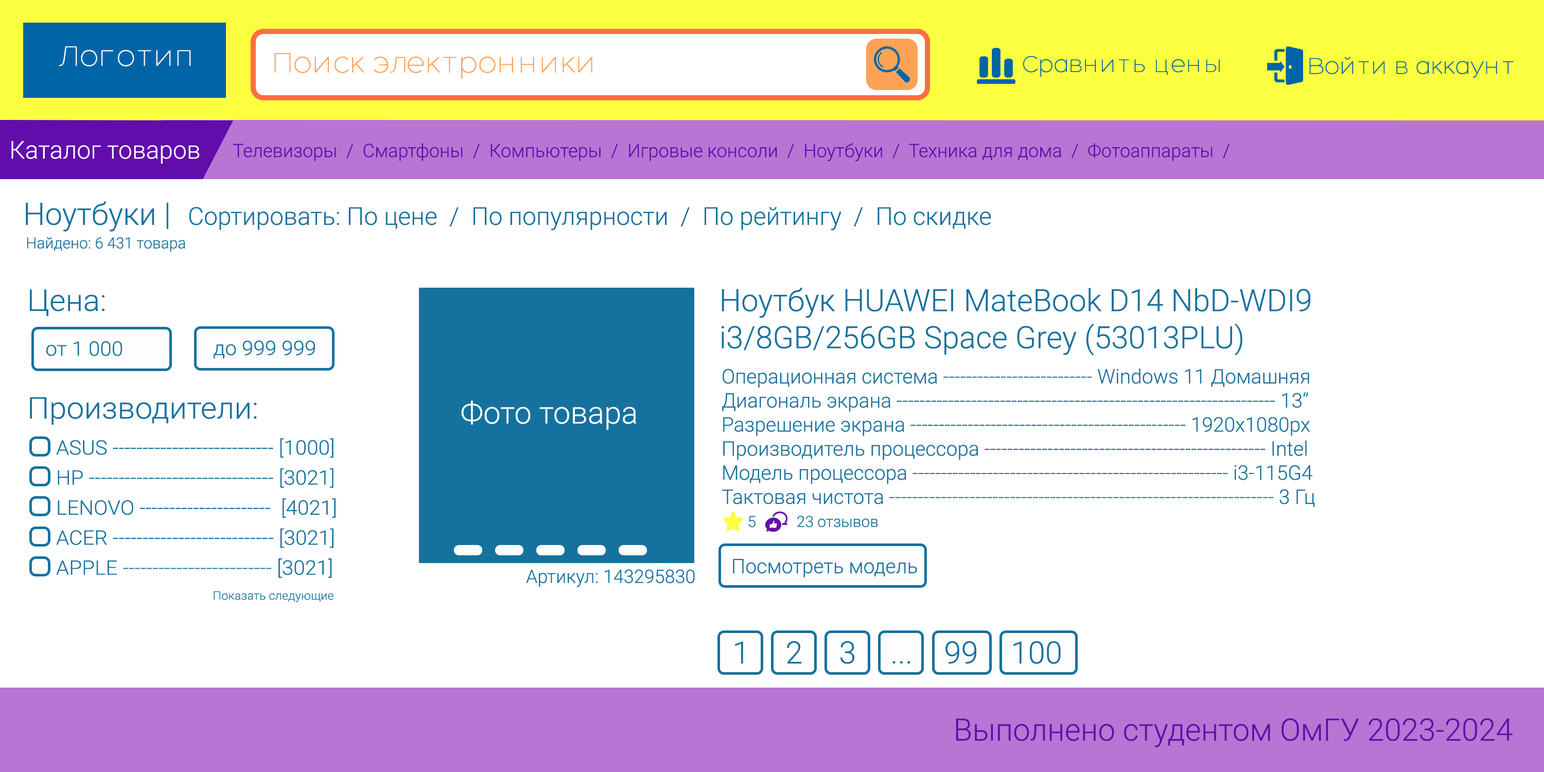
<style>
.page{position:relative;width:1544px;height:772px;background:#ffffff}
.page>*{position:absolute;margin:0}
.t1{font:30.9px "Hero-Light";color:#ffffff}
.t2{font:30.9px "Hero-Light";color:#fea356}
.t3{font:24.7px "Hero-Light";color:#0065a6}
.t4{font:24.7px "Roboto-Light";color:#ffffff}
.t5{font:18.5px "Roboto-Light";color:#620cac}
.t6{font:30.9px "Roboto-Light";color:#15729e}
.t7{font:24.7px "Roboto-Light";color:#15729e}
.t8{font:15.4px "Roboto-Light";color:#15729e}
.t9{font:30px "Roboto-Light";color:#15729e;scale:1.04 1}
.t10{font:20px "Roboto-Light";color:#15729e;scale:1.04 1}
.t11{font:20.1px "Roboto-Light";color:#15729e}
.t12{font:30.9px "Roboto-Light";color:#ffffff}
.t13{font:18.5px "Roboto-Light";color:#15729e}
.t14{font:11.7px "Roboto-Light";color:#15729e;scale:1.04 1}
.t15{font:30.9px "Roboto-Light";color:#620cac}
</style>
<div class="page">
<p class="t1" style="left:59px;top:46px;width:132px;height:20px">Логотип</p>
<p class="t2" style="left:274px;top:53px;width:318px;height:26px">Поиск электронники</p>
<p class="t3" style="left:1023px;top:56px;width:197px;height:21px">Сравнить цены</p>
<p class="t3" style="left:1310px;top:57px;width:204px;height:21px">Войти в аккаунт</p>
<p class="t4" style="left:11px;top:141px;width:189px;height:23px">Каталог товаров</p>
<p class="t5" style="left:233px;top:143px;width:997px;height:18px">Телевизоры  /  Смартфоны  /  Компьютеры  /  Игровые консоли  /  Ноутбуки  /  Техника для дома  /  Фотоаппараты  /</p>
<p class="t6" style="left:26px;top:201px;width:142px;height:31px">Ноутбуки |</p>
<p class="t7" style="left:189px;top:207px;width:802px;height:24px">Сортировать: По цене  /  По популярности  /  По рейтингу  /  По скидке</p>
<p class="t8" style="left:27px;top:237px;width:158px;height:15px">Найдено: 6 431 товара</p>
<p class="t9" style="left:30px;top:289px;width:75px;height:28px">Цена:</p>
<p class="t6" style="left:721px;top:288px;width:590px;height:68px">Ноутбук HUAWEI MateBook D14 NbD-WDI9 <br>i3/8GB/256GB Space Grey (53013PLU)</p>
<p class="t10" style="left:46px;top:341px;width:76px;height:15px">от 1 000</p>
<p class="t10" style="left:214px;top:340px;width:101px;height:19px">до 999 999</p>
<p class="t11" style="left:722px;top:368px;width:593px;height:140px">Операционная система -------------------------- Windows 11 Домашняя<br>Диагональ экрана ------------------------------------------------------------------ 13‘’<br>Разрешение экрана ------------------------------------------------ 1920x1080px<br>Производитель процессора ------------------------------------------------- Intel<br>Модель процессора ------------------------------------------------------- i3-115G4<br>Тактовая чистота ------------------------------------------------------------------- 3 Гц</p>
<p class="t9" style="left:30px;top:397px;width:227px;height:28px">Производители:</p>
<p class="t12" style="left:461px;top:400px;width:175px;height:30px">Фото товара</p>
<p class="t10" style="left:56px;top:438px;width:278px;height:20px">ASUS --------------------------- [1000]</p>
<p class="t10" style="left:58px;top:468px;width:276px;height:20px">HP ------------------------------- [3021]</p>
<p class="t10" style="left:58px;top:498px;width:278px;height:20px">LENOVO ----------------------  [4021]</p>
<p class="t8" style="left:748px;top:516px;width:8px;height:12px">5</p>
<p class="t8" style="left:797px;top:516px;width:81px;height:12px">23 отзывов</p>
<p class="t10" style="left:56px;top:528px;width:278px;height:20px">ACER --------------------------- [3021]</p>
<p class="t10" style="left:56px;top:559px;width:276px;height:19px">APPLE ------------------------- [3021]</p>
<p class="t13" style="left:526px;top:569px;width:169px;height:18px">Артикул: 143295830</p>
<p class="t11" style="left:733px;top:559px;width:184px;height:19px">Посмотреть модель</p>
<p class="t14" style="left:214px;top:591px;width:120px;height:11px">Показать следующие</p>
<p class="t6" style="left:735px;top:641px;width:8px;height:23px">1</p>
<p class="t6" style="left:787px;top:641px;width:15px;height:23px">2</p>
<p class="t6" style="left:841px;top:641px;width:14px;height:23px">3</p>
<p class="t6" style="left:946px;top:641px;width:31px;height:23px">99</p>
<p class="t6" style="left:1014px;top:641px;width:47px;height:23px">100</p>
<p class="t6" style="left:893px;top:661px;width:18px;height:3px">...</p>
<p class="t15" style="left:956px;top:718px;width:557px;height:29px">Выполнено студентом ОмГУ 2023-2024</p>
</div>
